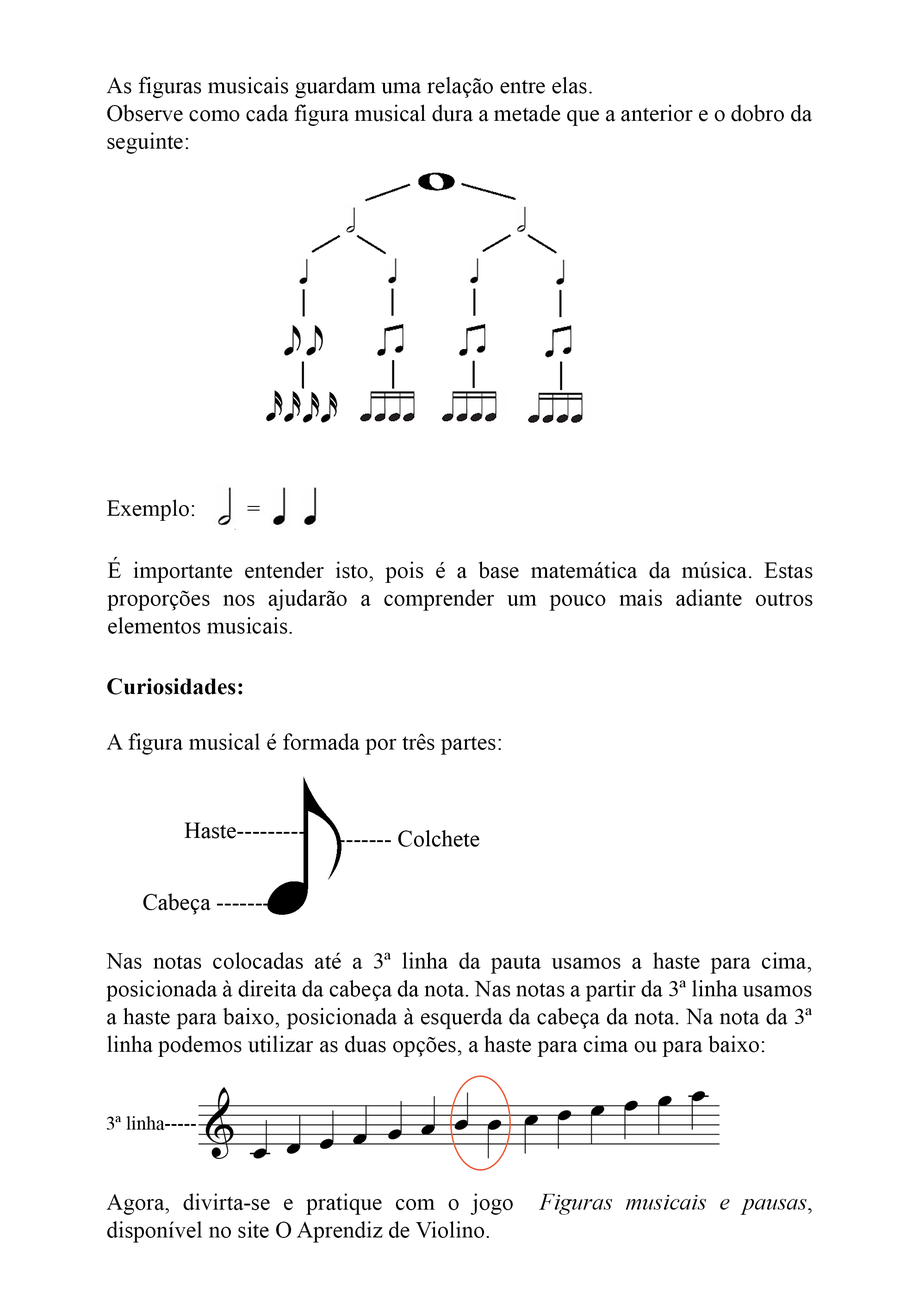
<style>
.page{position:relative;width:918px;height:1299px;background:#ffffff}
.page>*{position:absolute;margin:0}
.t1{font:23.1px "TimesNewRomanPSMT";color:#000000}
.t2{font:23.1px "TimesNewRomanPS-BoldMT";color:#000000}
.t3{font:23.1px "TimesNewRomanPS-ItalicMT";color:#000000}
</style>
<div class="page">
<p class="t1" style="left:106px;top:77px;width:707px;height:77px;text-align:justify">As figuras musicais guardam uma relação entre elas.<br>Observe como cada figura musical dura a metade que a anterior e o dobro da seguinte:</p>
<p class="t1" style="left:107px;top:499px;width:87px;height:22px">Exemplo:</p>
<p class="t1" style="left:247px;top:506px;width:13px;height:4px">=</p>
<p class="t1" style="left:107px;top:557px;width:706px;height:77px;text-align:justify">É importante entender isto, pois é a base matemática da música. Estas proporções nos ajudarão a comprender um pouco mais adiante outros elementos musicais.</p>
<p class="t1" style="left:106px;top:678px;width:395px;height:76px;text-align:justify"><span class="t2">Curiosidades:<br><br></span>A figura musical é formada por três partes:</p>
<p class="t1" style="left:106px;top:952px;width:706px;height:105px;text-align:justify">Nas notas colocadas até a 3ª linha da pauta usamos a haste para cima, posicionada à direita da cabeça da nota. Nas notas a partir da 3ª linha usamos a haste para baixo, posicionada à esquerda da cabeça da nota. Na nota da 3ª linha podemos utilizar as duas opções, a haste para cima ou para baixo:</p>
<p class="t1" style="left:106px;top:1193px;width:706px;height:49px;text-align:justify">Agora, divirta-se e pratique com o jogo  <span class="t3">Figuras musicais e pausas</span>, disponível no site O Aprendiz de Violino.</p>
</div>
